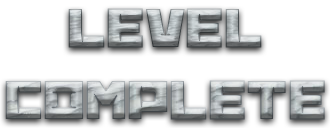
<style>
.page{position:relative;width:330px;height:128px;background:#ffffff}
.page>*{position:absolute;margin:0}
.t1{font:60px "BananaBrick"}
</style>
<div class="page">
<p class="t1" style="left:5px;top:8px;width:320px;height:112px;text-align:center">LEVEL<br>ComplEte</p>
</div>
